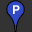
<style>
.page{position:relative;width:32px;height:32px;background:#333333}
.page>*{position:absolute;margin:0}
.t1{font:12px "Arial-BoldMT";color:#ffffff}
</style>
<div class="page">
<p class="t1" style="left:13px;top:5px;width:7px;height:9px">P</p>
</div>
